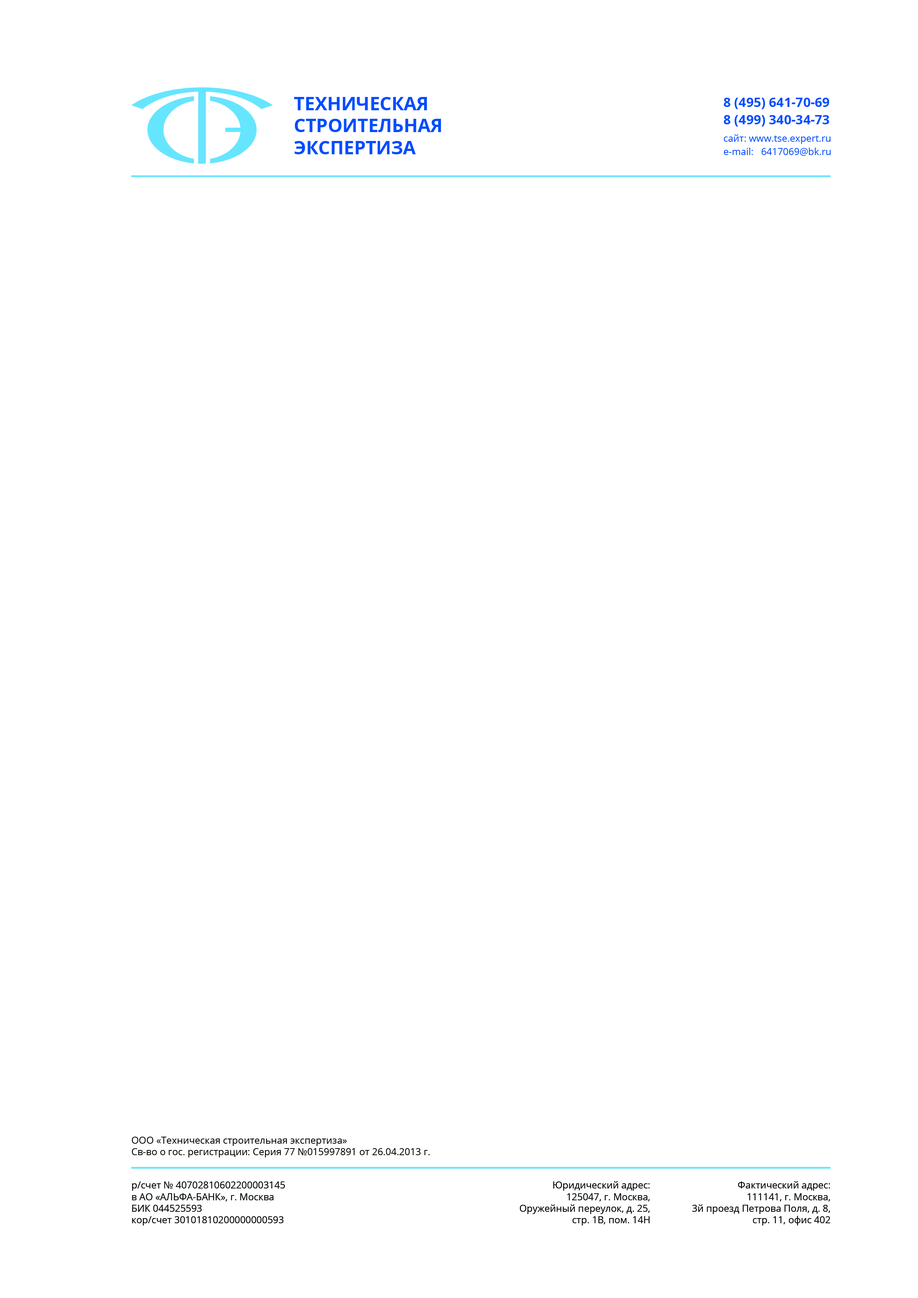
<style>
.page{position:relative;width:918px;height:1298px;background:#ffffff}
.page>*{position:absolute;margin:0}
.t1{font:18.4px/21.9px "OpenSans-Bold";color:#004dff;text-transform:uppercase}
.t2{font:13.1px/17.5px "OpenSans-Bold";color:#004dff;text-transform:uppercase}
.t3{font:9.6px/17.5px "OpenSans";color:#004dff}
.t4{font:9.6px/13.1px "OpenSans";color:#004dff}
.t5{font:9.6px "OpenSans";color:#000000}
.t6{font:9.6px "OpenSans";color:#060808}
.t7{font:9.6px "OpenSans";letter-spacing:-0.005em;color:#060808}
.t8{font:9.6px "OpenSans";letter-spacing:-0.004em;color:#060808}
.t9{font:9.6px "OpenSans";letter-spacing:0.003em;color:#060808}
.t10{font:9.6px "OpenSans";letter-spacing:-0.014em;color:#060808}
.t11{font:9.6px "OpenSans";letter-spacing:-0.012em;color:#060808}
.t12{font:9.6px "OpenSans";letter-spacing:0.002em;color:#060808}
.t13{font:9.6px "OpenSans";letter-spacing:-0.007em;color:#060808}
.t14{font:9.6px "OpenSans";letter-spacing:-0.008em;color:#060808}
.t15{font:9.6px "OpenSans";letter-spacing:-0.006em;color:#060808}
.t16{font:9.6px "OpenSans";letter-spacing:-0.013em;color:#060808}
.t17{font:9.6px "OpenSans";letter-spacing:-0.002em;color:#060808}
.t18{font:9.6px "OpenSans";letter-spacing:-0.011em;color:#060808}
.t19{font:9.6px "OpenSans";letter-spacing:-0.003em;color:#060808}
.t20{font:9.6px "OpenSans";letter-spacing:0.004em;color:#060808}
.t21{font:9.6px "OpenSans";letter-spacing:0.006em;color:#060808}
.t22{font:9.6px "OpenSans";letter-spacing:-0.022em;color:#060808}
.t23{font:9.6px "OpenSans";letter-spacing:-0.015em;color:#060808}
</style>
<div class="page">
<p class="t1" style="left:294px;top:97px;width:147px;height:57px">Техническая<br>строительная<br>экспертиза</p>
<p class="t2" style="left:724px;top:98px;width:107px;height:58px">8 (495) 641-70-69<br>8 (499) 340-34-73<br><span class="t3">сайт: www.tse.expert.ru<br></span><span class="t4">e-mail:   6417069@bk.ru</span></p>
<p class="t5" style="left:132px;top:1137px;width:298px;height:21px">ООО «Техническая строительная экспертиза»<br>Cв-во о гос. регистрации: Серия 77 №015997891 от 26.04.2013 г.</p>
<p class="t6" style="left:132px;top:1182px;width:153px;height:44px">р/<span class="t7">сч</span><span class="t8">е</span>т <span class="t9">№</span> 4070<span class="t10">2</span>8106<span class="t11">0</span>2200<span class="t11">0</span>03145<br>в <span class="t12">А</span><span class="t7">О </span><span class="t13">«</span><span class="t12">А</span>Л<span class="t14">Ь</span><span class="t12">Ф</span>А-Б<span class="t11">А</span><span class="t12">Н</span><span class="t7">К»</span><span class="t9">, </span><span class="t8">г</span>. <span class="t8">М</span><span class="t7">о</span><span class="t8">с</span>ква<br>БИ<span class="t15">К</span> 04452<span class="t16">5</span>593<br>кор/<span class="t17">с</span><span class="t7">ч</span><span class="t8">е</span>т 3010181<span class="t18">0</span>2000<span class="t11">0</span>0000<span class="t11">5</span>93</p>
<p class="t6" style="left:520px;top:1182px;width:130px;height:44px;text-align:right">Юр<span class="t8">и</span><span class="t15">д</span><span class="t19">и</span><span class="t7">ч</span><span class="t8">ес</span>к<span class="t8">и</span><span class="t19">й </span><span class="t8">а</span><span class="t15">д</span>р<span class="t13">е</span><span class="t8">с</span>:<br>125047<span class="t20">, </span><span class="t8">г</span>. <span class="t8">М</span><span class="t7">о</span><span class="t8">с</span>кв<span class="t8">а</span><span class="t9">,<br></span><span class="t7">О</span>р<span class="t13">у</span>ж<span class="t13">е</span><span class="t19">й</span>н<span class="t21">ы</span><span class="t19">й</span> п<span class="t7">е</span>р<span class="t13">е</span><span class="t8">у</span>л<span class="t13">о</span>к, <span class="t7">д</span>. 25<span class="t9">,<br></span><span class="t15">с</span>тр. 1<span class="t22">В</span><span class="t9">,</span> п<span class="t7">о</span><span class="t8">м</span>. 14Н</p>
<p class="t6" style="left:693px;top:1182px;width:138px;height:44px;text-align:right"><span class="t12">Ф</span>акт<span class="t8">и</span><span class="t7">ч</span><span class="t8">ес</span>к<span class="t8">и</span><span class="t19">й а</span><span class="t15">д</span>р<span class="t13">е</span><span class="t8">с</span>: <br>111141<span class="t20">, </span><span class="t8">г</span>. <span class="t8">М</span><span class="t7">о</span><span class="t8">с</span><span class="t23">к</span>ва,<br>3й проезд Петрова Поля, д. 8,<br>стр. 11, офис 402</p>
</div>
